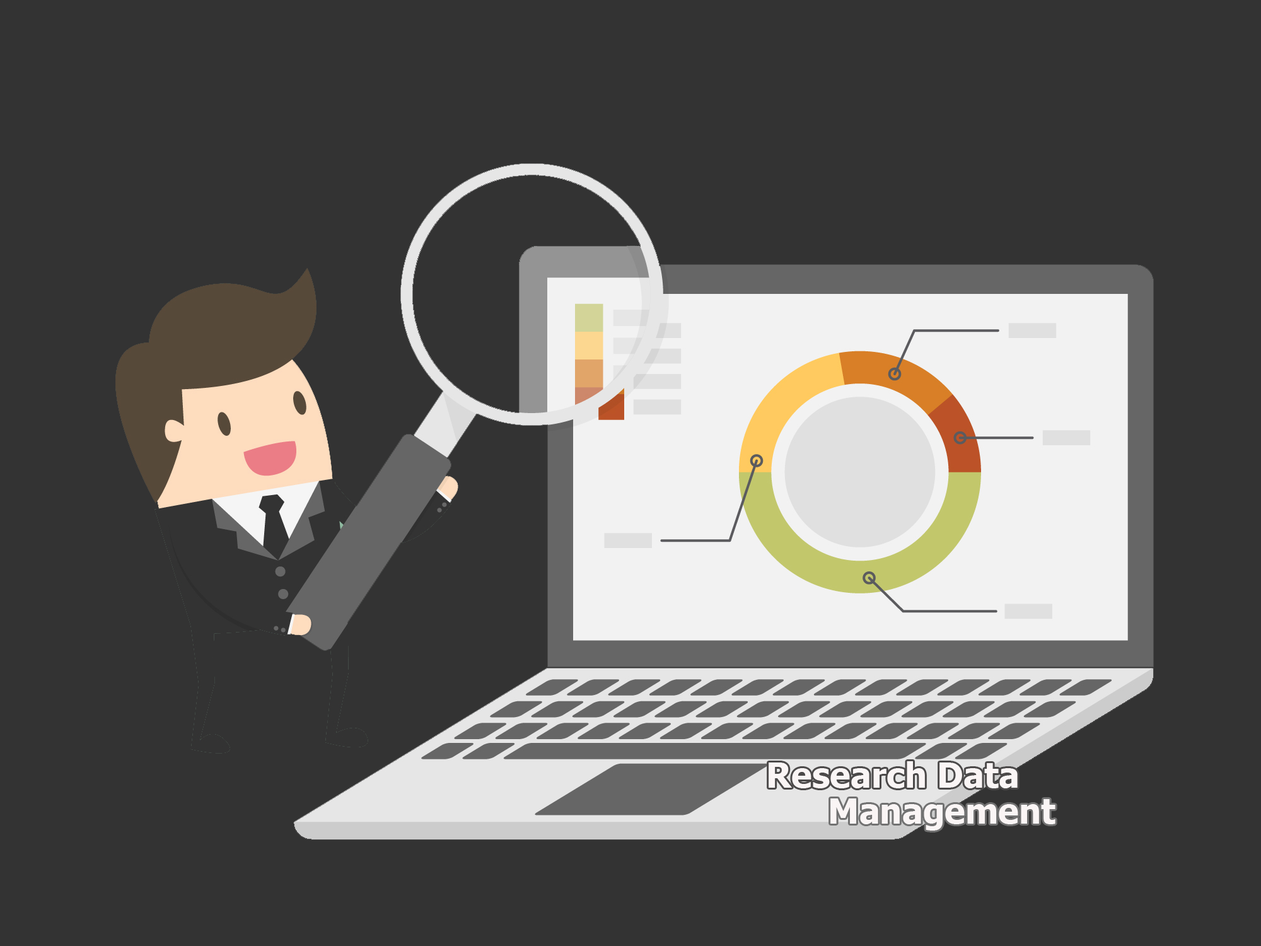
<style>
.page{position:relative;width:1261px;height:946px;background:#333333}
.page>*{position:absolute;margin:0}
.t1{font:34.7px "Tahoma-Bold";color:#faf5f5}
</style>
<div class="page">
<p class="t1" style="left:769px;top:761px;width:249px;height:27px">Research Data</p>
<p class="t1" style="left:830px;top:798px;width:225px;height:32px">Management</p>
</div>
